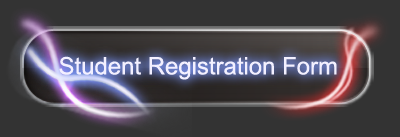
<style>
.page{position:relative;width:400px;height:137px;background:#333333}
.page>*{position:absolute;margin:0}
.t1{font:24px "ArialMT";color:#ffffff}
</style>
<div class="page">
<p class="t1" style="left:59px;top:56px;width:278px;height:24px">Student Registration Form</p>
</div>
